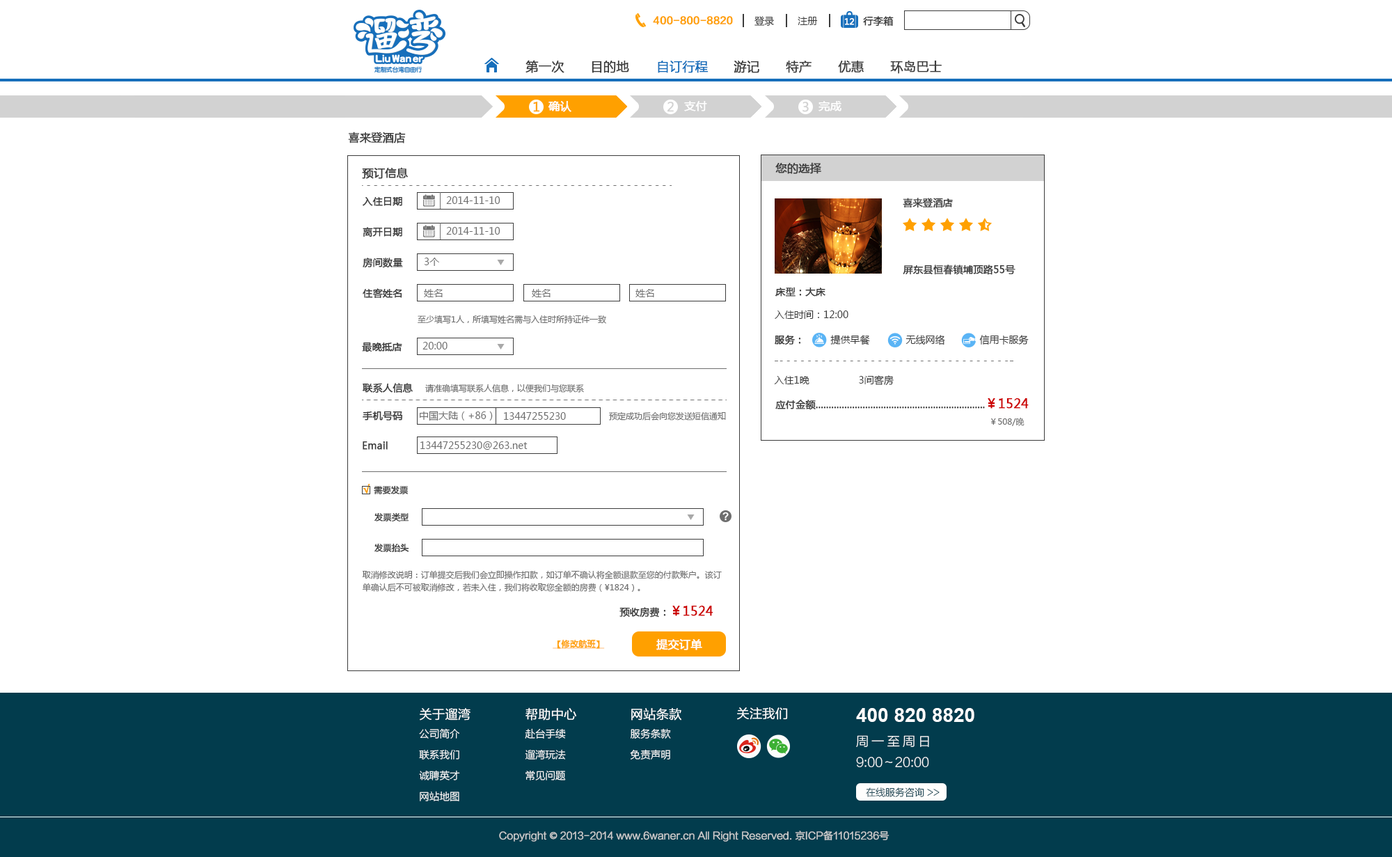
<style>
.page{position:relative;width:1392px;height:857px;background:#ffffff}
.page>*{position:absolute;margin:0}
.t1{font:9.7px "FZLTZHK--GBK1-0";color:#ffa000;font-weight:bold}
.t2{font:9.7px "MicrosoftYaHei";color:#3c3c3c}
.t3{font:9.7px "MicrosoftYaHei";color:#3c3c3c;font-weight:bold}
.t4{font:8.4px "MicrosoftYaHei";color:#fefefe;font-weight:bold}
.t5{font:12.5px "MicrosoftYaHei";color:#3c3c3c;font-weight:bold}
.t6{font:12.5px "MicrosoftYaHei";color:#176fbb;font-weight:bold}
.t7{font:12.5px "MicrosoftYaHei";color:#ffa000;font-weight:bold}
.t8{font:11.1px "MicrosoftYaHei";color:#ffffff;font-weight:bold}
.t9{font:12.5px "MicrosoftYaHei";color:#d2d2d2;font-weight:bold}
.t10{font:11.1px "MicrosoftYaHei";color:#3c3c3c;font-weight:bold}
.t11{font:9.7px "MicrosoftYaHei";color:#6e6e6e}
.t12{font:8.4px "MicrosoftYaHei";color:#6e6e6e}
.t13{font:12.5px "MicrosoftYaHei";color:#cc0000;font-weight:bold}
.t14{font:11.1px "MicrosoftYaHei";color:#ffa000;font-weight:bold}
.t15{font:8.4px "MicrosoftYaHei";color:#3c3c3c;font-weight:bold}
.t16{font:8.4px/12.5px "MicrosoftYaHei";color:#6e6e6e}
.t17{font:8.4px "MicrosoftYaHei";color:#ffa000;font-weight:bold;text-decoration:underline}
.t18{font:10.1px/20.9px "FZLTXHK--GBK1-0";color:#ffffff}
.t19{font:12.5px/20.9px "FZLTXHK--GBK1-0";color:#ffffff;font-weight:bold}
.t20{font:12.5px "FZLTXHK--GBK1-0";color:#ffffff;font-weight:bold}
.t21{font:19.5px "Arial-BoldMT";color:#ffffff}
.t22{font:12.5px/20.9px "FZLTXHK--GBK1-0";color:#ffffff}
.t23{font:12.5px/20.9px "FZLTXHK--GBK1-0";letter-spacing:0.24em;color:#ffffff}
.t24{font:9.7px "FZLTXHK--GBK1-0"}
.t25{font:9.7px "FZLTXHK--GBK1-0";color:#d0d0d0;font-weight:bold}
.t26{font:9.7px "AdobeHeitiStd-Regular";color:#d0d0d0;font-weight:bold}
</style>
<div class="page">
<p class="t1" style="left:653px;top:16px;width:80px;height:9px">400-800-8820</p>
<p class="t2" style="left:754px;top:16px;width:20px;height:10px">登录</p>
<p class="t2" style="left:798px;top:17px;width:20px;height:8px">注册</p>
<p class="t3" style="left:863px;top:16px;width:31px;height:10px">行李箱</p>
<p class="t4" style="left:844px;top:18px;width:10px;height:7px">12</p>
<p class="t5" style="left:525px;top:60px;width:39px;height:13px">第一次</p>
<p class="t5" style="left:592px;top:61px;width:37px;height:12px">目的地</p>
<p class="t6" style="left:658px;top:61px;width:50px;height:12px">自订行程</p>
<p class="t5" style="left:734px;top:61px;width:25px;height:12px">游记</p>
<p class="t5" style="left:786px;top:61px;width:25px;height:12px">特产</p>
<p class="t5" style="left:838px;top:61px;width:26px;height:12px">优惠</p>
<p class="t5" style="left:890px;top:61px;width:52px;height:13px">环岛巴士</p>
<p class="t7" style="left:533px;top:102px;width:6px;height:10px">1</p>
<p class="t8" style="left:548px;top:101px;width:23px;height:11px">确认</p>
<p class="t9" style="left:667px;top:102px;width:7px;height:10px">2</p>
<p class="t8" style="left:684px;top:101px;width:23px;height:10px">支付</p>
<p class="t9" style="left:802px;top:102px;width:7px;height:10px">3</p>
<p class="t8" style="left:818px;top:101px;width:23px;height:10px">完成</p>
<p class="t10" style="left:348px;top:132px;width:58px;height:11px">喜来登酒店</p>
<p class="t10" style="left:362px;top:167px;width:46px;height:12px">预订信息</p>
<p class="t10" style="left:775px;top:162px;width:46px;height:12px">您的选择</p>
<p class="t3" style="left:363px;top:197px;width:39px;height:9px">入住日期</p>
<p class="t11" style="left:446px;top:196px;width:54px;height:8px">2014-11-10</p>
<p class="t3" style="left:903px;top:198px;width:50px;height:10px">喜来登酒店</p>
<p class="t3" style="left:363px;top:227px;width:39px;height:10px">离开日期</p>
<p class="t11" style="left:446px;top:227px;width:54px;height:8px">2014-11-10</p>
<p class="t3" style="left:363px;top:257px;width:40px;height:11px">房间数量</p>
<p class="t11" style="left:424px;top:257px;width:15px;height:9px">3个</p>
<p class="t3" style="left:903px;top:264px;width:112px;height:11px">屏东县恒春镇埔顶路55号</p>
<p class="t3" style="left:363px;top:288px;width:39px;height:11px">住客姓名</p>
<p class="t11" style="left:424px;top:289px;width:19px;height:8px">姓名</p>
<p class="t11" style="left:532px;top:289px;width:18px;height:8px">姓名</p>
<p class="t11" style="left:635px;top:289px;width:19px;height:8px">姓名</p>
<p class="t3" style="left:775px;top:287px;width:50px;height:9px">床型：大床</p>
<p class="t12" style="left:418px;top:315px;width:188px;height:9px">至少填写1人，所填写姓名需与入住时所持证件一致</p>
<p class="t2" style="left:775px;top:310px;width:73px;height:9px">入住时间：12:00</p>
<p class="t3" style="left:362px;top:342px;width:40px;height:10px">最晚抵店</p>
<p class="t11" style="left:422px;top:342px;width:25px;height:7px">20:00</p>
<p class="t3" style="left:775px;top:335px;width:26px;height:9px">服务：</p>
<p class="t2" style="left:830px;top:335px;width:40px;height:10px">提供早餐</p>
<p class="t2" style="left:905px;top:335px;width:40px;height:10px">无线网络</p>
<p class="t2" style="left:979px;top:335px;width:50px;height:9px">信用卡服务</p>
<p class="t2" style="left:774px;top:376px;width:35px;height:8px">入住1晚</p>
<p class="t2" style="left:859px;top:375px;width:35px;height:11px">3间客房</p>
<p class="t3" style="left:363px;top:383px;width:50px;height:10px">联系人信息</p>
<p class="t12" style="left:425px;top:383px;width:159px;height:10px">请准确填写联系人信息，以便我们与您联系</p>
<p class="t3" style="left:775px;top:398px;width:254px;height:12px">应付金额.................................................................<span class="t13">￥1524</span></p>
<p class="t3" style="left:363px;top:411px;width:40px;height:9px">手机号码</p>
<p class="t11" style="left:420px;top:411px;width:73px;height:10px">中国大陆（+86）</p>
<p class="t11" style="left:504px;top:412px;width:62px;height:8px">13447255230</p>
<p class="t12" style="left:609px;top:411px;width:117px;height:9px">预定成功后会向您发送短信通知</p>
<p class="t12" style="left:991px;top:417px;width:33px;height:9px">￥508/晚</p>
<p class="t3" style="left:363px;top:441px;width:25px;height:9px">Email</p>
<p class="t11" style="left:420px;top:441px;width:108px;height:9px">13447255230@263.net</p>
<p class="t14" style="left:363px;top:484px;width:7px;height:9px">√</p>
<p class="t15" style="left:374px;top:485px;width:34px;height:9px">需要发票</p>
<p class="t15" style="left:374px;top:512px;width:35px;height:9px">发票类型</p>
<p class="t15" style="left:374px;top:543px;width:35px;height:10px">发票抬头</p>
<p class="t16" style="left:362px;top:570px;width:360px;height:22px">取消修改说明：订单提交后我们会立即操作扣款，如订单不确认将全额退款至您的付款账户。该订单确认后不可被取消修改，若未入住，我们将收取您全额的房费（¥1824）。</p>
<p class="t3" style="left:619px;top:605px;width:94px;height:12px">预收房费：<span class="t13">￥1524</span></p>
<p class="t17" style="left:553px;top:640px;width:52px;height:9px">【修改航班】</p>
<p class="t8" style="left:656px;top:638px;width:46px;height:12px">提交订单</p>
<p class="t18" style="left:419px;top:708px;width:51px;height:93px"><span class="t19">关于遛湾<br></span>公司简介<br>联系我们<br>诚聘英才<br>网站地图</p>
<p class="t18" style="left:525px;top:707px;width:51px;height:73px"><span class="t19">帮助中心<br></span>赴台手续 <br>遛湾玩法 <br>常见问题</p>
<p class="t18" style="left:630px;top:708px;width:51px;height:51px"><span class="t19">网站条款 <br></span>服务条款<br>免责声明</p>
<p class="t20" style="left:737px;top:707px;width:51px;height:13px">关注我们</p>
<p class="t21" style="left:856px;top:708px;width:118px;height:14px">400 820 8820</p>
<p class="t22" style="left:856px;top:735px;width:73px;height:32px"><span class="t23">周一至周日<br></span>9:00～20:00</p>
<p class="t24" style="left:866px;top:787px;width:74px;height:10px">在线服务咨询 &gt;&gt;</p>
<p class="t25" style="left:499px;top:830px;width:390px;height:11px">Copyright <span class="t26">©</span> 2013-2014 www.6waner.cn All Right Reserved. 京ICP备11015236号</p>
</div>
